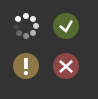
<style>
.page{position:relative;width:98px;height:99px;background:#333333}
.page>*{position:absolute;margin:0}
.t1{font:23.6px "AvenirNextCondensed-Bold";color:#ffffff}
</style>
<div class="page">
<p class="t1" style="left:23px;top:58px;width:5px;height:17px">!</p>
</div>
